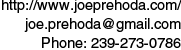
<style>
.page{position:relative;width:181px;height:50px;background:#ffffff}
.page>*{position:absolute;margin:0}
.t1{font:14px/19px "HelveticaLTStd-Roman";color:#000000;scale:1.05 1}
</style>
<div class="page">
<p class="t1" style="left:2px;top:0px;width:180px;height:48px;text-align:right">http://www.joeprehoda.com/<br>joe.prehoda@gmail.com<br>Phone: 239-273-0786</p>
</div>
